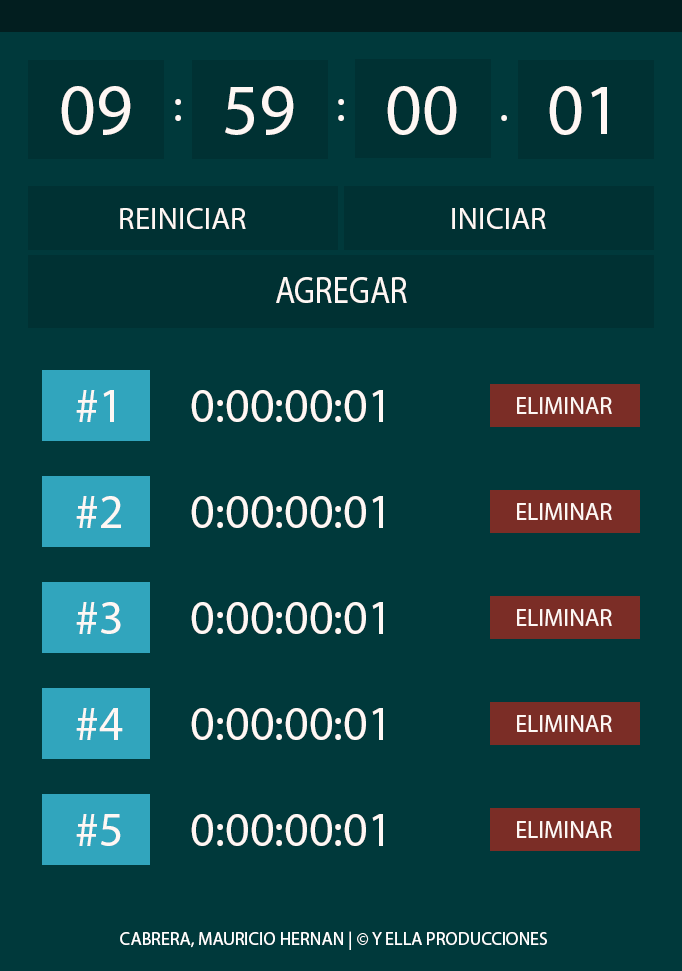
<style>
.page{position:relative;width:682px;height:971px;background:#00393b}
.page>*{position:absolute;margin:0}
.t1{font:72px "MyriadPro-Regular";color:#fef7f4}
.t2{font:48px "MyriadPro-Regular";color:#fef7f4}
.t3{font:30px "MyriadPro-Regular";color:#fef7f4;scale:1.04 1}
.t4{font:37.5px "MyriadPro-Regular";color:#fef7f4;scale:0.87 1}
.t5{font:24px "MyriadPro-Regular";color:#fef7f4}
.t6{font:18px "MyriadPro-Regular";color:#ffffff}
</style>
<div class="page">
<p class="t1" style="left:61px;top:86px;width:70px;height:49px">09</p>
<p class="t1" style="left:225px;top:86px;width:69px;height:49px">59</p>
<p class="t1" style="left:387px;top:86px;width:70px;height:49px">00</p>
<p class="t1" style="left:549px;top:86px;width:58px;height:49px">01</p>
<p class="t2" style="left:175px;top:99px;width:6px;height:22px">:</p>
<p class="t2" style="left:338px;top:99px;width:6px;height:22px">:</p>
<p class="t2" style="left:501px;top:115px;width:6px;height:6px">.</p>
<p class="t3" style="left:120px;top:208px;width:126px;height:21px">REINICIAR</p>
<p class="t3" style="left:452px;top:208px;width:94px;height:21px">INICIAR</p>
<p class="t4" style="left:276px;top:277px;width:131px;height:26px">AGREGAR</p>
<p class="t2" style="left:76px;top:390px;width:38px;height:32px">#1</p>
<p class="t2" style="left:191px;top:390px;width:192px;height:32px">0:00:00:01</p>
<p class="t5" style="left:517px;top:397px;width:95px;height:17px">ELIMINAR</p>
<p class="t2" style="left:76px;top:496px;width:45px;height:32px">#2</p>
<p class="t2" style="left:191px;top:496px;width:192px;height:32px">0:00:00:01</p>
<p class="t5" style="left:517px;top:503px;width:95px;height:17px">ELIMINAR</p>
<p class="t2" style="left:76px;top:602px;width:45px;height:32px">#3</p>
<p class="t2" style="left:191px;top:602px;width:192px;height:32px">0:00:00:01</p>
<p class="t5" style="left:517px;top:609px;width:95px;height:17px">ELIMINAR</p>
<p class="t2" style="left:76px;top:708px;width:47px;height:32px">#4</p>
<p class="t2" style="left:191px;top:708px;width:192px;height:32px">0:00:00:01</p>
<p class="t5" style="left:517px;top:715px;width:95px;height:17px">ELIMINAR</p>
<p class="t2" style="left:76px;top:814px;width:45px;height:32px">#5</p>
<p class="t2" style="left:191px;top:814px;width:192px;height:32px">0:00:00:01</p>
<p class="t5" style="left:517px;top:821px;width:95px;height:17px">ELIMINAR</p>
<p class="t6" style="left:120px;top:931px;width:427px;height:19px">CABRERA, MAURICIO HERNAN | © Y ELLA PRODUCCIONES</p>
</div>
